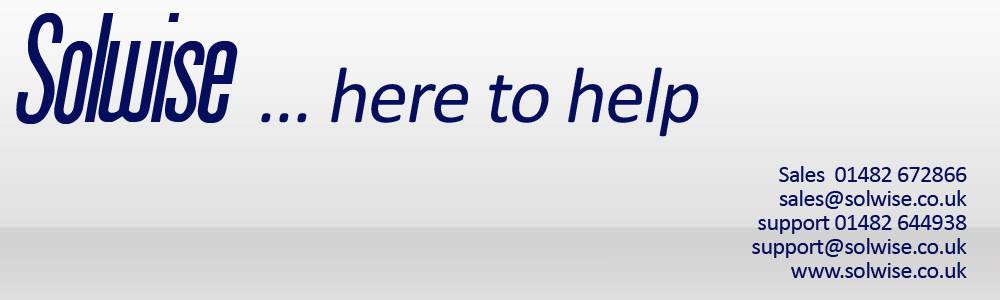
<style>
.page{position:relative;width:1000px;height:300px}
.page>*{position:absolute;margin:0}
.t1{font:80px "Calibri";letter-spacing:-0.025em;color:#050e5c;font-style:italic}
.t2{font:150px "Arizona";letter-spacing:-0.025em;color:#050e5c;font-style:italic}
.t3{font:24px/24px "Calibri";letter-spacing:-0.025em;color:#050e5c}
</style>
<div class="page">
<p class="t1" style="left:16px;top:13px;width:683px;height:124px"><span class="t2">Solwise </span>... here to help</p>
<p class="t3" style="left:752px;top:166px;width:215px;height:112px;text-align:right">Sales  01482 672866<br>sales@solwise.co.uk<br>support 01482 644938<br>support@solwise.co.uk<br>www.solwise.co.uk</p>
</div>
